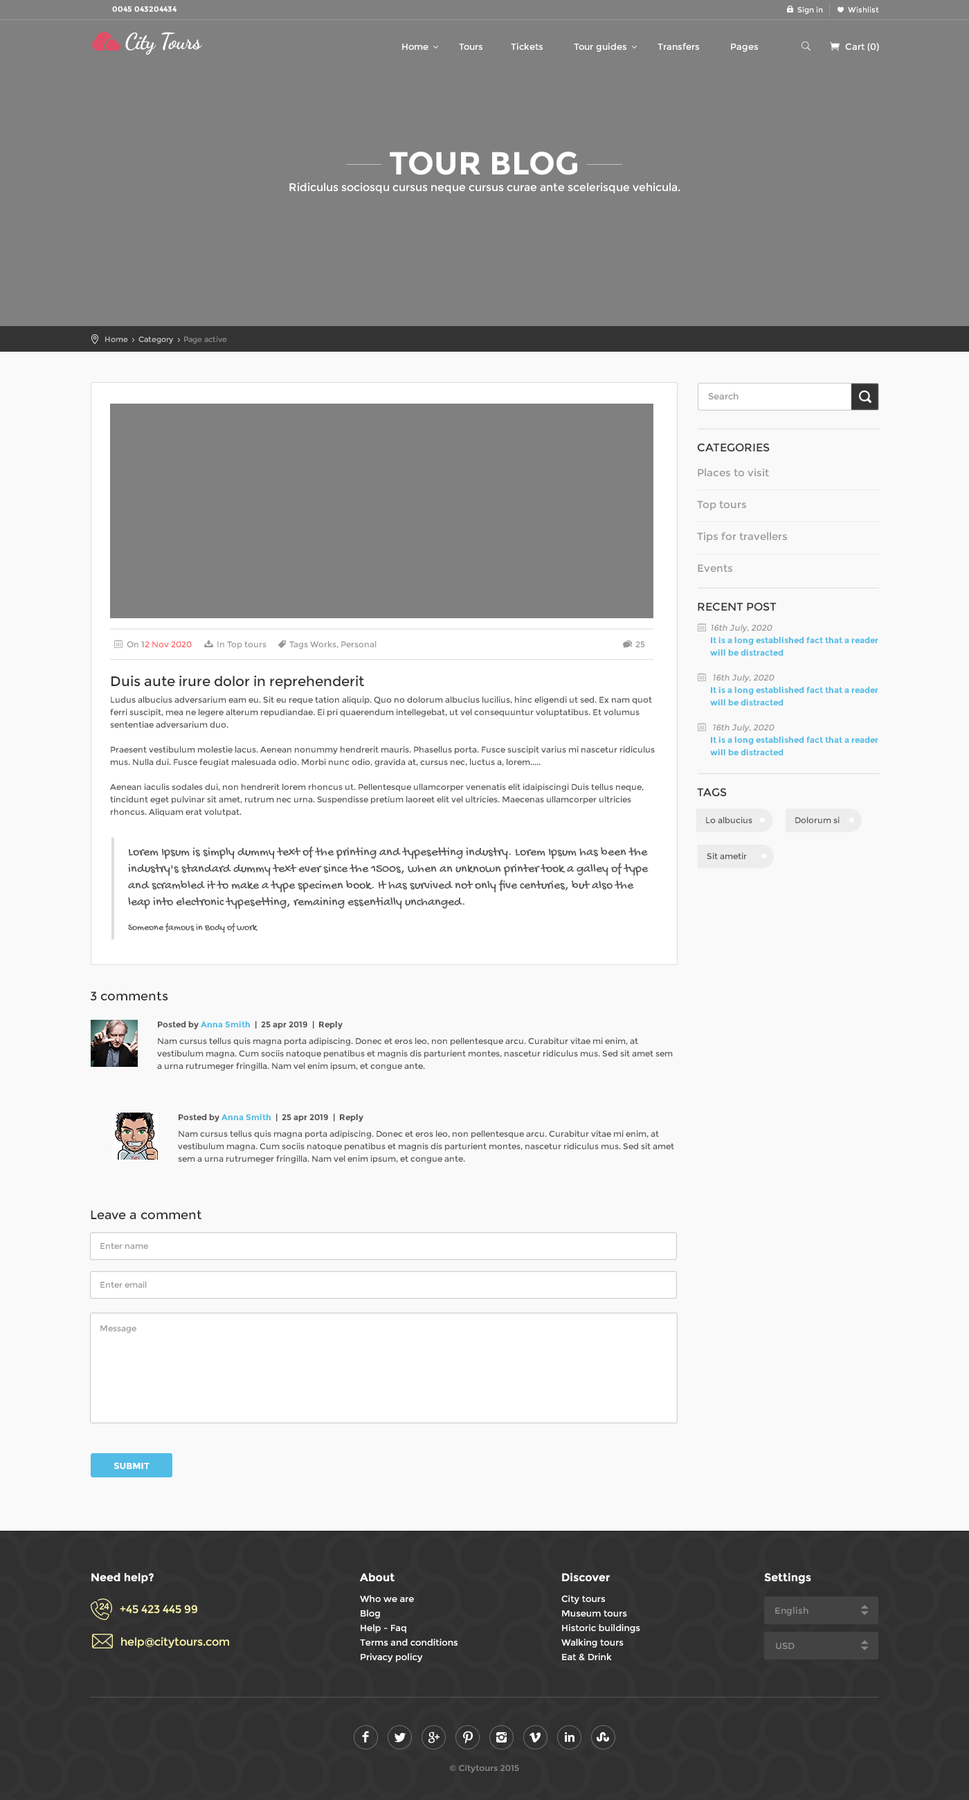
<style>
.page{position:relative;width:969px;height:1800px;background:#f9f9f9}
.page>*{position:absolute;margin:0}
.t1{font:7.6px "Montserrat-Bold";color:#ffffff}
.t2{font:7.6px "Montserrat-Regular";color:#ffffff}
.t3{font:22.2px "DancingScript-Bold";letter-spacing:-0.025em;color:#ffffff}
.t4{font:9px "Montserrat-Regular";color:#ffffff}
.t5{font:31.8px "Montserrat-Bold";color:#ffffff}
.t6{font:11.1px "Montserrat-Regular";color:#ffffff}
.t7{font:7.6px "Montserrat-Regular";color:#bebebe}
.t8{font:7.6px "Montserrat-Regular";color:#888888}
.t9{font:9px "Montserrat-Regular";color:#999999}
.t10{font:10.4px/31.8px "Montserrat-Regular";color:#999999}
.t11{font:11.1px/16.6px "Montserrat-Regular";color:#333333}
.t12{font:10.4px/24.9px "Montserrat-Regular";color:#999999}
.t13{font:11.1px "Montserrat-Regular";color:#333333}
.t14{font:8.3px/12.5px "Montserrat-Bold";color:#51bce6}
.t15{font:8.3px/12.5px "Montserrat-Regular";color:#999999;font-style:italic}
.t16{font:8.3px "Montserrat-Regular";color:#999999}
.t17{font:8.3px "Montserrat-Regular";color:#ff6666}
.t18{font:8.3px/12.5px "Montserrat-Regular";color:#555555}
.t19{font:13.8px/12.5px "Montserrat-Regular";color:#333333}
.t20{font:8.3px/16.6px "Montserrat-Regular";color:#555555}
.t21{font:8.3px "Montserrat-Regular";color:#555555}
.t22{font:12.5px/16.6px "GochiHand-Regular";color:#555555}
.t23{font:9.7px/12.5px "GochiHand-Regular";color:#555555}
.t24{font:12.5px "Montserrat-Regular";color:#333333}
.t25{font:8.3px/12.5px "Montserrat-Bold";color:#555555}
.t26{font:9px "Montserrat-Bold";color:#ffffff;text-transform:uppercase}
.t27{font:11.1px "Montserrat-Bold";color:#ffffff}
.t28{font:9px/6.2px "Montserrat-Regular";color:#ffffff}
.t29{font:11.1px/8.3px "Montserrat-Bold";color:#ffffff}
.t30{font:9px/12.5px "Montserrat-Regular";color:#ffffff}
.t31{font:11.1px "Montserrat-Regular";color:#fdf7ac}
.t32{font:9px "Montserrat-Regular";color:#8e8e8e}
.t33{font:8.2px "Montserrat-Regular";color:#8c8c8c;scale:1.04 1}
</style>
<div class="page">
<p class="t1" style="left:112px;top:6px;width:65px;height:6px">0045 043204434</p>
<p class="t2" style="left:798px;top:6px;width:81px;height:9px">Sign in            Wishlist</p>
<p class="t3" style="left:125px;top:32px;width:77px;height:23px">City Tours</p>
<p class="t4" style="left:402px;top:43px;width:356px;height:9px">Home           Tours          Tickets           Tour guides           Transfers           Pages</p>
<p class="t4" style="left:845px;top:43px;width:34px;height:8px">Cart (0)</p>
<p class="t5" style="left:390px;top:152px;width:187px;height:23px">TOUR BLOG</p>
<p class="t6" style="left:289px;top:182px;width:392px;height:11px">Ridiculus sociosqu cursus neque cursus curae ante scelerisque vehicula.</p>
<p class="t7" style="left:105px;top:336px;width:122px;height:8px">Home     Category     <span class="t8">Page active</span></p>
<p class="t9" style="left:708px;top:393px;width:31px;height:6px">Search</p>
<p class="t10" style="left:697px;top:443px;width:90px;height:129px"><span class="t11">CATEGORIES<br></span><span class="t12">Places to visit<br></span>Top tours<br>Tips for travellers<br>Events</p>
<p class="t13" style="left:698px;top:602px;width:79px;height:9px">RECENT POST</p>
<p class="t14" style="left:710px;top:624px;width:169px;height:131px"><span class="t15">16th July, 2020<br></span>It is a long established fact that a reader will be distracted<br><br><span class="t15"> 16th July, 2020<br></span>It is a long established fact that a reader will be distracted<br><br><span class="t15"> 16th July, 2020<br></span>It is a long established fact that a reader will be distracted</p>
<p class="t16" style="left:127px;top:641px;width:518px;height:8px">On 1<span class="t17">2 Nov 2020</span>            In Top tours           Tags Works, Personal                25</p>
<p class="t18" style="left:110px;top:675px;width:545px;height:142px"><span class="t19">Duis aute irure dolor in reprehenderit<br></span><span class="t20">Ludus albucius adversarium eam eu. Sit eu reque tation aliquip. Quo no dolorum albucius lucilius, hinc eligendi ut sed. Ex nam quot </span>ferri suscipit, mea ne legere alterum repudiandae. Ei pri quaerendum intellegebat, ut vel consequuntur voluptatibus. Et volumus sententiae adversarium duo.<br><br>Praesent vestibulum molestie lacus. Aenean nonummy hendrerit mauris. Phasellus porta. Fusce suscipit varius mi nascetur ridiculus mus. Nulla dui. Fusce feugiat malesuada odio. Morbi nunc odio, gravida at, cursus nec, luctus a, lorem.....<br><br>Aenean iaculis sodales dui, non hendrerit lorem rhoncus ut. Pellentesque ullamcorper venenatis elit idaipiscingi Duis tellus neque, tincidunt eget pulvinar sit amet, rutrum nec urna. Suspendisse pretium laoreet elit vel ultricies. Maecenas ullamcorper ultricies rhoncus. Aliquam erat volutpat.</p>
<p class="t13" style="left:697px;top:788px;width:30px;height:9px">TAGS</p>
<p class="t21" style="left:706px;top:817px;width:47px;height:6px">Lo albucius</p>
<p class="t21" style="left:795px;top:817px;width:45px;height:6px">Dolorum si</p>
<p class="t22" style="left:128px;top:846px;width:521px;height:87px">Lorem Ipsum is simply dummy text of the printing and typesetting industry. Lorem Ipsum has been the industry's standard dummy text ever since the 1500s, when an unknown printer took a galley of type and scrambled it to make a type specimen book. It has survived not only five centuries, but also the leap into electronic typesetting, remaining essentially unchanged.<br><br><span class="t23">Someone famous in Body of work</span></p>
<p class="t21" style="left:707px;top:853px;width:40px;height:6px">Sit ametir</p>
<p class="t24" style="left:90px;top:991px;width:78px;height:10px">3 comments</p>
<p class="t18" style="left:157px;top:1020px;width:516px;height:51px"><span class="t25">Posted by </span><span class="t14">Anna Smith</span><span class="t25">  |  25 apr 2019  |  Reply<br></span><span class="t20">Nam cursus tellus quis magna porta adipiscing. Donec et eros leo, non pellentesque arcu. Curabitur vitae mi enim, at </span>vestibulum magna. Cum sociis natoque penatibus et magnis dis parturient montes, nascetur ridiculus mus. Sed sit amet sem a urna rutrumeger fringilla. Nam vel enim ipsum, et congue ante.</p>
<p class="t18" style="left:178px;top:1113px;width:496px;height:51px"><span class="t25">Posted by </span><span class="t14">Anna Smith</span><span class="t25">  |  25 apr 2019  |  Reply<br></span><span class="t20">Nam cursus tellus quis magna porta adipiscing. Donec et eros leo, non pellentesque arcu. Curabitur vitae mi enim, at </span>vestibulum magna. Cum sociis natoque penatibus et magnis dis parturient montes, nascetur ridiculus mus. Sed sit amet sem a urna rutrumeger fringilla. Nam vel enim ipsum, et congue ante.</p>
<p class="t24" style="left:91px;top:1210px;width:111px;height:10px">Leave a comment</p>
<p class="t16" style="left:100px;top:1243px;width:48px;height:6px">Enter name</p>
<p class="t16" style="left:100px;top:1281px;width:47px;height:7px">Enter email</p>
<p class="t16" style="left:100px;top:1325px;width:36px;height:8px">Message</p>
<p class="t26" style="left:114px;top:1462px;width:36px;height:7px">submit</p>
<p class="t27" style="left:91px;top:1573px;width:63px;height:10px">Need help?</p>
<p class="t28" style="left:360px;top:1573px;width:98px;height:89px"><span class="t29">About<br></span><span class="t30">Who we are<br></span>Blog<br>Help - Faq<br>Terms and conditions<br>Privacy policy</p>
<p class="t28" style="left:561px;top:1573px;width:79px;height:88px"><span class="t29">Discover<br></span><span class="t30">City tours<br></span>Museum tours<br>Historic buildings<br>Walking tours<br>Eat &amp; Drink</p>
<p class="t27" style="left:764px;top:1573px;width:47px;height:11px">Settings</p>
<p class="t31" style="left:120px;top:1605px;width:77px;height:9px">+45 423 445 99</p>
<p class="t32" style="left:775px;top:1607px;width:34px;height:9px">English</p>
<p class="t31" style="left:121px;top:1637px;width:108px;height:11px">help@citytours.com</p>
<p class="t32" style="left:776px;top:1642px;width:19px;height:7px">USD</p>
<p class="t33" style="left:449px;top:1765px;width:70px;height:8px">© Citytours 2015</p>
</div>
